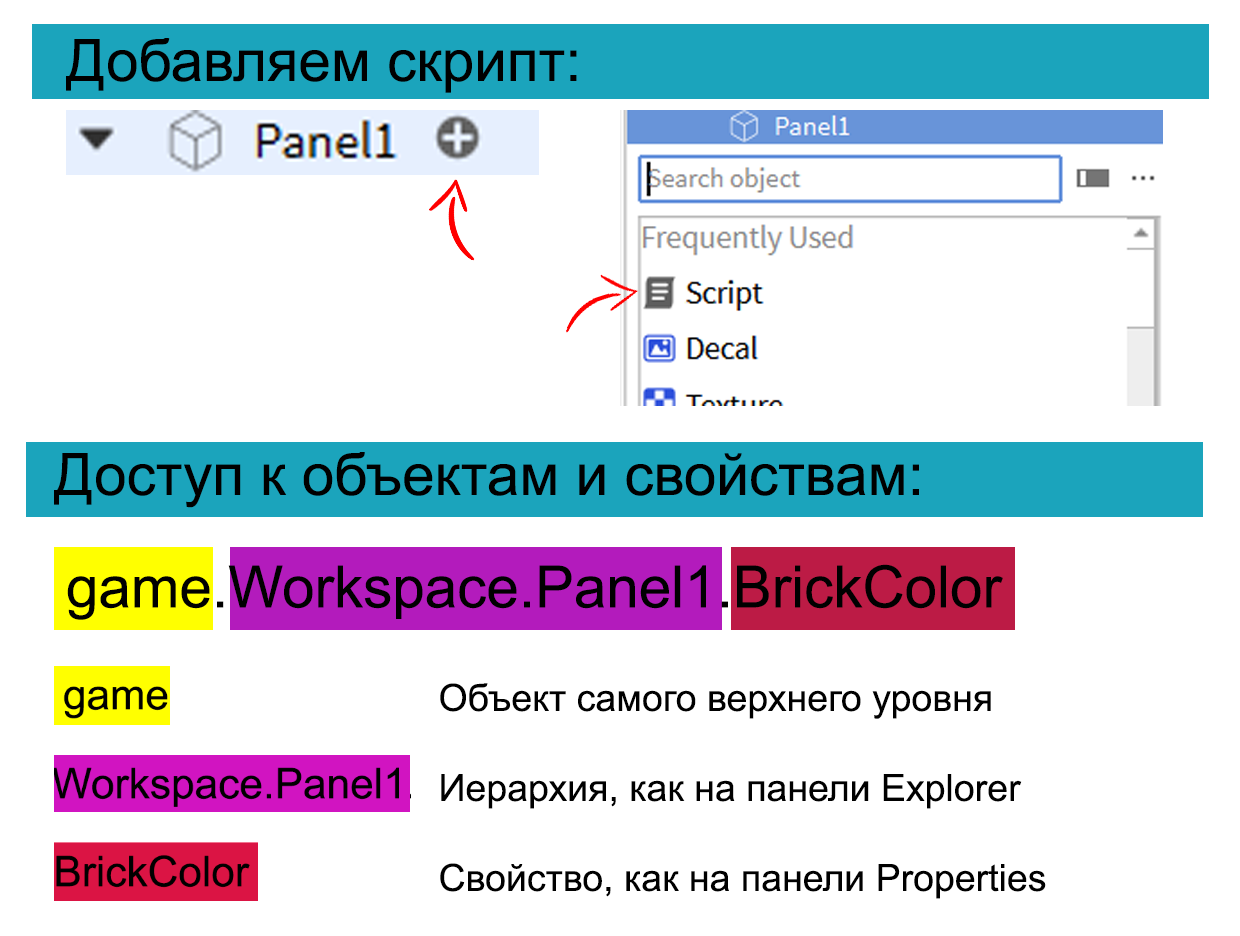
<style>
.page{position:relative;width:1240px;height:936px;background:#ffffff}
.page>*{position:absolute;margin:0}
.t1{font:58.3px "ArialMT";color:#000000}
.t2{font:37.5px "ArialMT";color:#000000}
</style>
<div class="page">
<p class="t1" style="left:66px;top:38px;width:511px;height:55px">Добавляем скрипт:</p>
<p class="t1" style="left:54px;top:452px;width:865px;height:56px">Доступ к объектам и свойствам:</p>
<p class="t1" style="left:67px;top:564px;width:936px;height:56px">game.Workspace.Panel1.BrickColor</p>
<p class="t2" style="left:440px;top:683px;width:606px;height:216px">Объект самого верхнего уровня<br><br>Иерархия, как на панели Explorer<br><br>Свойство, как на панели Properties</p>
</div>
